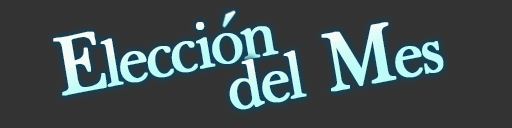
<style>
.page{position:relative;width:512px;height:128px;background:#333333}
.page>*{position:absolute;margin:0}
.t1{font:74.4px "BaskervilleLight";letter-spacing:-0.06em;color:#c7fcf8;font-weight:bold;scale:0.93 1}
.t2{font:97.5px "BaskervilleLight";letter-spacing:-0.06em;color:#c7fcf8;font-weight:bold;scale:0.93 1}
.t3{font:74.4px "BaskervilleLight";letter-spacing:-0.06em;color:#c2fcf8;font-weight:bold;scale:0.93 1}
.t4{font:97.5px "BaskervilleLight";letter-spacing:-0.06em;color:#c2fcf8;font-weight:bold;scale:0.93 1}
</style>
<div class="page">
<p class="t1" style="left:53px;top:22px;width:226px;height:74px;rotate:-11deg"><span class="t2">E</span>leccion</p>
<p class="t3" style="left:229px;top:22px;width:215px;height:88px;rotate:-11deg">del <span class="t4">M</span>es</p>
</div>
